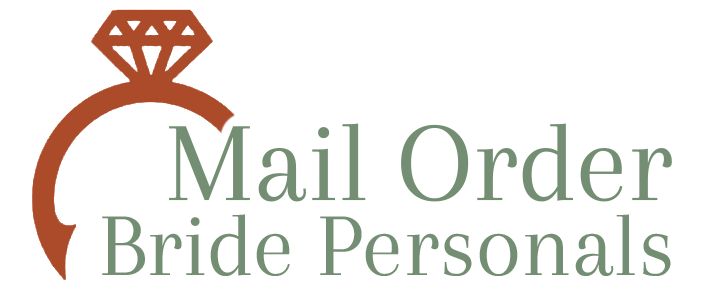
<style>
.page{position:relative;width:714px;height:304px;background:#ffffff}
.page>*{position:absolute;margin:0}
.t1{font:116.6px "Arapey-Regular";color:#748e73}
.t2{font:92.7px "Arapey-Regular";color:#748e73}
</style>
<div class="page">
<p class="t1" style="left:169px;top:123px;width:503px;height:79px">Mail Order</p>
<p class="t2" style="left:102px;top:214px;width:569px;height:62px">Bride Personals</p>
</div>
